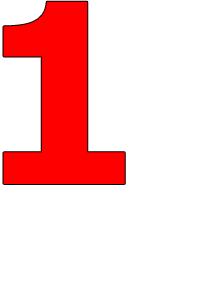
<style>
.page{position:relative;width:220px;height:300px;background:#ffffff}
.page>*{position:absolute;margin:0}
.t1{font:250px "Verdana-Bold";color:#ff0000}
</style>
<div class="page">
<p class="t1" style="left:3px;top:1px;width:122px;height:183px">1</p>
</div>
